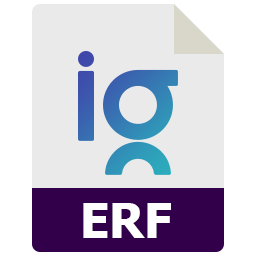
<style>
.page{position:relative;width:256px;height:256px;background:#eaeaea}
.page>*{position:absolute;margin:0}
.t1{font:48px "Tahoma-Bold";color:#ffffff}
</style>
<div class="page">
<p class="t1" style="left:83px;top:203px;width:88px;height:35px">ERF</p>
</div>
